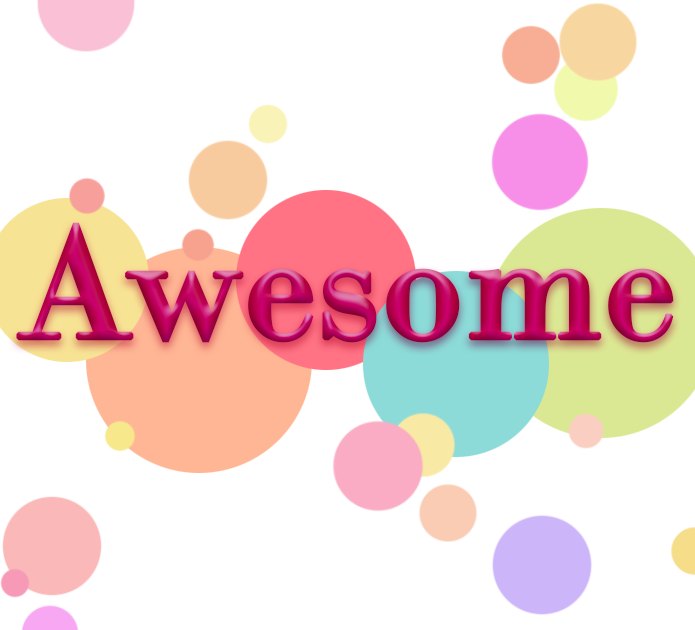
<style>
.page{position:relative;width:695px;height:630px;background:#ffffff}
.page>*{position:absolute;margin:0}
.t1{font:170px "BodoniMT";letter-spacing:-0.025em;font-weight:bold}
</style>
<div class="page">
<p class="t1" style="left:16px;top:222px;width:658px;height:121px">Awesome</p>
</div>
